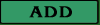
<style>
.page{position:relative;width:100px;height:25px;background:#339966}
.page>*{position:absolute;margin:0}
.t1{font:22.2px "JSChusrias";letter-spacing:0.025em;color:#000000;font-weight:bold;scale:1.15 1}
</style>
<div class="page">
<p class="t1" style="left:29px;top:6px;width:43px;height:12px">ADD</p>
</div>
